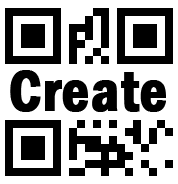
<style>
.page{position:relative;width:178px;height:184px;background:#ffffff}
.page>*{position:absolute;margin:0}
.t1{font:58.7px "FranklinGothic-DemiCond";color:#000000;font-weight:bold}
</style>
<div class="page">
<p class="t1" style="left:10px;top:70px;width:156px;height:42px">Create</p>
</div>
